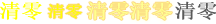
<style>
.page{position:relative;width:216px;height:24px;background:#ffffff}
.page>*{position:absolute;margin:0}
.t1{font:19.4px "SimSun";color:#ffff00;font-weight:bold;scale:1.09 1}
.t2{font:15.5px "SimSun";color:#ffff00;font-weight:bold;scale:1.09 1}
.t3{font:19.4px "SimSun";color:#ffff8e;font-weight:bold;scale:1.09 1}
.t4{font:19.4px "SimSun";color:#ffff94;font-weight:bold;scale:1.09 1}
.t5{font:19.4px "SimSun";color:#5b5b5b;font-weight:bold;scale:1.09 1}
</style>
<div class="page">
<p class="t1" style="left:0px;top:1px;width:42px;height:19px">清零</p>
<p class="t2" style="left:48px;top:4px;width:34px;height:15px">清零</p>
<p class="t3" style="left:87px;top:1px;width:42px;height:19px">清零</p>
<p class="t4" style="left:130px;top:1px;width:42px;height:19px">清零</p>
<p class="t5" style="left:175px;top:1px;width:42px;height:19px">清零</p>
</div>
